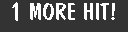
<style>
.page{position:relative;width:128px;height:32px;background:#333333}
.page>*{position:absolute;margin:0}
.t1{font:30px "DomCasualBT-Regular";color:#ffffff}
.t2{font:24px "DomCasualBT-Regular";color:#ffffff}
</style>
<div class="page">
<p class="t1" style="left:12px;top:2px;width:6px;height:19px">1</p>
<p class="t2" style="left:30px;top:3px;width:85px;height:17px">MORE HIT!</p>
</div>
